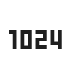
<style>
.page{position:relative;width:74px;height:74px;background:#ffffff}
.page>*{position:absolute;margin:0}
.t1{font:30px "04b24";color:#1f1f1f}
</style>
<div class="page">
<p class="t1" style="left:9px;top:30px;width:53px;height:19px">1024</p>
</div>
